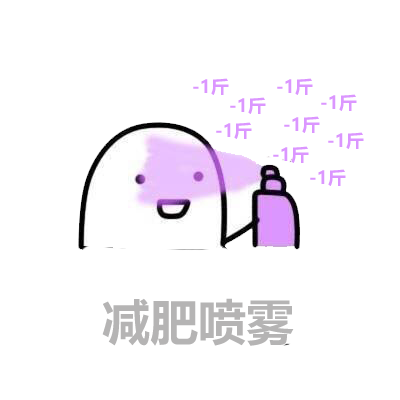
<style>
.page{position:relative;width:400px;height:400px;background:#ffffff}
.page>*{position:absolute;margin:0}
.t1{font:18px "MicrosoftYaHei-Bold";color:#db96ff}
.t2{font:48px "MicrosoftYaHei-Bold";color:#b5b4b4}
</style>
<div class="page">
<p class="t1" style="left:193px;top:78px;width:36px;height:17px">-1斤</p>
<p class="t1" style="left:277px;top:78px;width:36px;height:17px">-1斤</p>
<p class="t1" style="left:230px;top:97px;width:36px;height:17px">-1斤</p>
<p class="t1" style="left:321px;top:94px;width:36px;height:17px">-1斤</p>
<p class="t1" style="left:216px;top:122px;width:36px;height:17px">-1斤</p>
<p class="t1" style="left:284px;top:116px;width:36px;height:17px">-1斤</p>
<p class="t1" style="left:328px;top:132px;width:36px;height:17px">-1斤</p>
<p class="t1" style="left:273px;top:146px;width:36px;height:17px">-1斤</p>
<p class="t1" style="left:310px;top:169px;width:36px;height:17px">-1斤</p>
<p class="t2" style="left:102px;top:298px;width:192px;height:48px">减肥喷雾</p>
</div>
